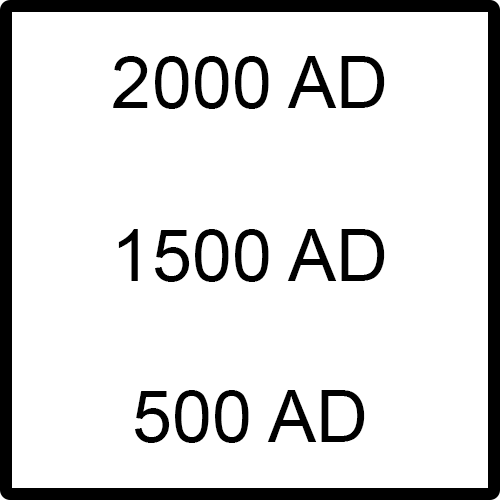
<style>
.page{position:relative;width:500px;height:500px;background:#ffffff}
.page>*{position:absolute;margin:0}
.t1{font:72px "ArialMT";color:#000000}
</style>
<div class="page">
<p class="t1" style="left:113px;top:56px;width:272px;height:53px">2000 AD</p>
<p class="t1" style="left:118px;top:229px;width:267px;height:53px">1500 AD</p>
<p class="t1" style="left:135px;top:390px;width:230px;height:53px">500 AD</p>
</div>
